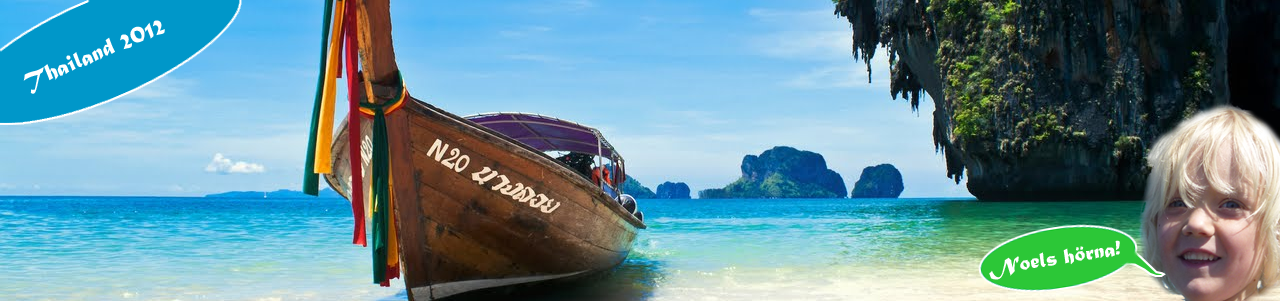
<style>
.page{position:relative;width:1280px;height:301px}
.page>*{position:absolute;margin:0}
.t1{font:24px "MaturaMTScriptCapitals";color:#ffffff}
.t2{font:22px "MaturaMTScriptCapitals";color:#ffffff}
</style>
<div class="page">
<p class="t1" style="left:23px;top:20px;width:142px;height:74px;rotate:-23deg">Thailand 2012</p>
<p class="t2" style="left:989px;top:240px;width:131px;height:40px;rotate:-9deg">Noels hörna!</p>
</div>
